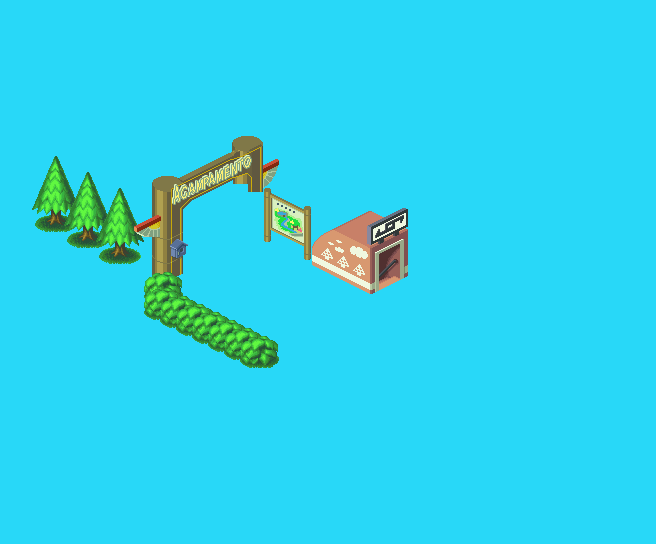
<style>
.page{position:relative;width:656px;height:544px;background:#28d8f8}
.page>*{position:absolute;margin:0}
.t1{font:14.3px "ArialMT";letter-spacing:0.08em;color:#ffef73;scale:0.74 1}
.t2{font:23.5px "ArialMT";letter-spacing:0.08em;color:#ffef73;scale:0.45 1}
.t3{font:15.7px "ArialMT";letter-spacing:0.08em;color:#ffef73;scale:0.67 1}
</style>
<div class="page">
<p class="t1" style="left:174px;top:157px;width:77px;height:47px;rotate:-26deg"><span class="t2">A</span><span class="t3">C</span>AMPAMENTO</p>
</div>
